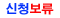
<style>
.page{position:relative;width:60px;height:18px;background:#ffffff}
.page>*{position:absolute;margin:0}
.t1{font:12px "H2gtrE";color:#0432fb}
.t2{font:12px "H2gtrE";color:#fb0505}
</style>
<div class="page">
<p class="t1" style="left:6px;top:3px;width:48px;height:12px">신청<span class="t2">보류</span></p>
</div>
